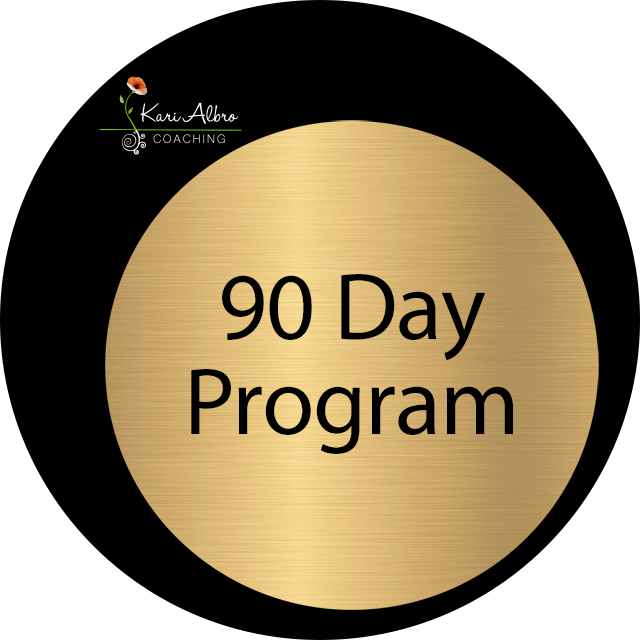
<style>
.page{position:relative;width:640px;height:640px;background:#000000}
.page>*{position:absolute;margin:0}
.t1{font:95.6px/95.6px "MyriadPro-Regular";letter-spacing:-0.01em;color:#000000}
</style>
<div class="page">
<p class="t1" style="left:191px;top:274px;width:322px;height:180px;text-align:center">90 Day<br>Program</p>
</div>
